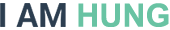
<style>
.page{position:relative;width:170px;height:30px;background:#ffffff}
.page>*{position:absolute;margin:0}
.t1{font:32px "Arial-BoldMT";color:#68c3a3}
</style>
<div class="page">
<p class="t1" style="left:78px;top:3px;width:91px;height:24px">HUNG</p>
</div>
